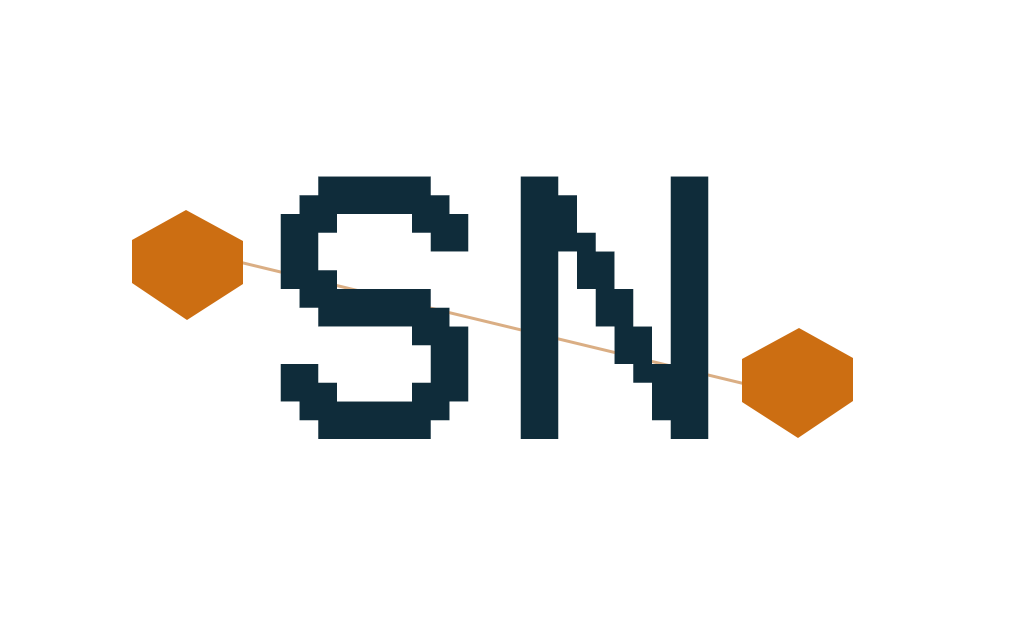
<style>
.page{position:relative;width:1009px;height:635px;background:#ffffff}
.page>*{position:absolute;margin:0}
.t1{font:300px "Terminal";letter-spacing:0.05em;color:#0f2c3a}
</style>
<div class="page">
<p class="t1" style="left:280px;top:176px;width:429px;height:263px">SN</p>
</div>
